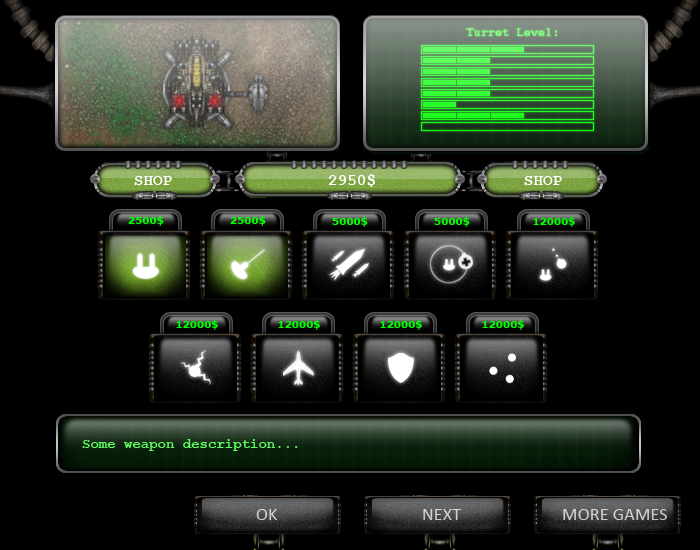
<style>
.page{position:relative;width:700px;height:550px;background:#000000}
.page>*{position:absolute;margin:0}
.t1{font:12.7px "Courier";color:#83fd83}
.t2{font:16px "CourierNewPS-BoldMT";color:#ffffff}
.t3{font:10.1px "Verdana-Bold";color:#01ff01}
.t4{font:14px "CourierNewPS-BoldMT";color:#5cfd5c}
.t5{font:18.3px "Calibri";color:#d1d1d1}
.t6{font:18.3px "Calibri";color:#d2d2d2}
.t7{font:18.3px "Calibri";color:#d0d0d0}
</style>
<div class="page">
<p class="t1" style="left:466px;top:28px;width:91px;height:8px">Turret Level:</p>
<p class="t2" style="left:328px;top:174px;width:47px;height:13px">2950$</p>
<p class="t2" style="left:134px;top:176px;width:38px;height:9px">SHOP</p>
<p class="t2" style="left:524px;top:176px;width:38px;height:9px">SHOP</p>
<p class="t3" style="left:128px;top:215px;width:36px;height:11px">2500$</p>
<p class="t3" style="left:230px;top:215px;width:36px;height:11px">2500$</p>
<p class="t3" style="left:332px;top:216px;width:36px;height:11px">5000$</p>
<p class="t3" style="left:434px;top:216px;width:36px;height:11px">5000$</p>
<p class="t3" style="left:533px;top:216px;width:42px;height:11px">12000$</p>
<p class="t3" style="left:176px;top:319px;width:42px;height:11px">12000$</p>
<p class="t3" style="left:278px;top:319px;width:42px;height:11px">12000$</p>
<p class="t3" style="left:380px;top:319px;width:42px;height:11px">12000$</p>
<p class="t3" style="left:482px;top:319px;width:42px;height:11px">12000$</p>
<p class="t4" style="left:82px;top:439px;width:216px;height:12px">Some weapon description...</p>
<p class="t5" style="left:256px;top:509px;width:21px;height:11px">OK</p>
<p class="t6" style="left:423px;top:509px;width:38px;height:11px">NEXT</p>
<p class="t7" style="left:563px;top:509px;width:104px;height:11px">MORE GAMES</p>
</div>
